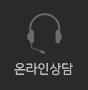
<style>
.page{position:relative;width:88px;height:90px;background:#292b2a}
.page>*{position:absolute;margin:0}
.t1{font:13px "NanumSquareR";color:#c7c7c7}
</style>
<div class="page">
<p class="t1" style="left:14px;top:62px;width:59px;height:14px">온라인상담</p>
</div>
